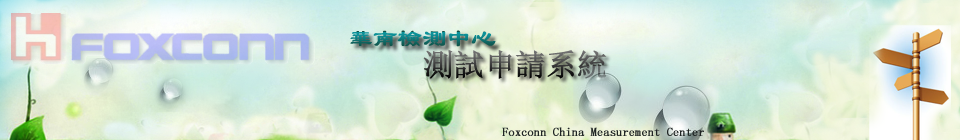
<style>
.page{position:relative;width:960px;height:140px}
.page>*{position:absolute;margin:0}
.t1{font:24px "LiSu";font-weight:bold}
.t2{font:30px "SimSun";font-weight:bold}
.t3{font:12px "SimSun";color:#1f2424;font-weight:bold}
</style>
<div class="page">
<p class="t1" style="left:350px;top:30px;width:146px;height:17px">華南檢測中心</p>
<p class="t2" style="left:423px;top:49px;width:184px;height:30px">測試申請系統</p>
<p class="t3" style="left:502px;top:127px;width:202px;height:9px">Foxconn China Measurement Center</p>
</div>
